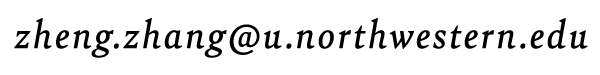
<style>
.page{position:relative;width:600px;height:75px;background:#ffffff}
.page>*{position:absolute;margin:0}
.t1{font:41.3px "Bely-Italic";letter-spacing:0.04em;color:#000000;font-weight:bold}
</style>
<div class="page">
<p class="t1" style="left:14px;top:18px;width:574px;height:40px">zheng.zhang@u.northwestern.edu</p>
</div>
